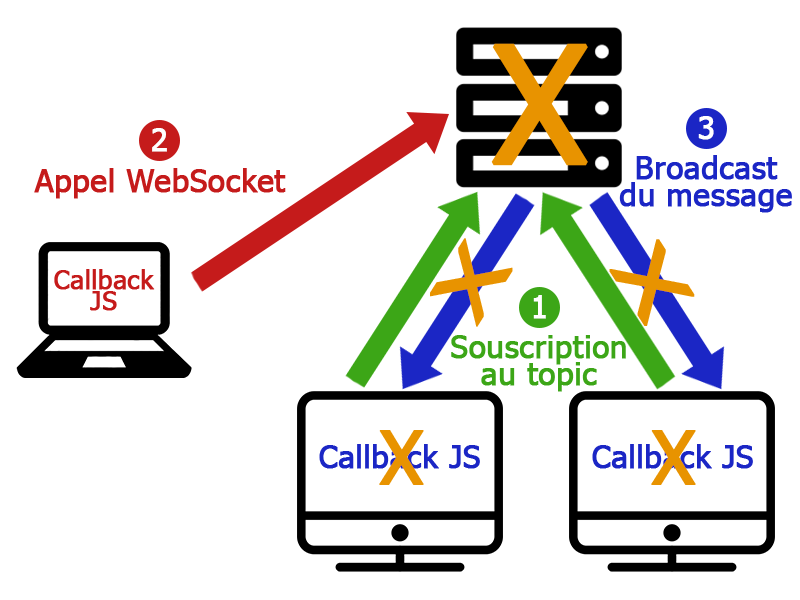
<style>
.page{position:relative;width:800px;height:600px;background:#ffffff}
.page>*{position:absolute;margin:0}
.t1{font:161.5px "Tahoma";color:#e89300;font-weight:bold}
.t2{font:31.2px "Tahoma";color:#ffffff;font-weight:bold}
.t3{font:31.2px "Tahoma";color:#1b26c5;font-weight:bold}
.t4{font:31.2px "Tahoma";color:#c51b1b;font-weight:bold}
.t5{font:76.6px "Tahoma";color:#e89300;font-weight:bold;scale:1.51 1}
.t6{font:26px "Tahoma";color:#c51b1b;font-weight:bold}
.t7{font:31.2px "Tahoma";color:#3ca617;font-weight:bold}
.t8{font:73.9px "Tahoma";color:#e89300;font-weight:bold}
</style>
<div class="page">
<p class="t1" style="left:491px;top:43px;width:97px;height:123px">X</p>
<p class="t2" style="left:698px;top:116px;width:16px;height:24px">3</p>
<p class="t2" style="left:152px;top:128px;width:15px;height:24px">2</p>
<p class="t3" style="left:619px;top:155px;width:173px;height:58px;text-align:center">Broadcast<br>du message</p>
<p class="t4" style="left:34px;top:168px;width:252px;height:31px">Appel WebSocket</p>
<p class="t5" style="left:430px;top:238px;width:83px;height:89px;rotate:-58deg">X</p>
<p class="t5" style="left:609px;top:239px;width:86px;height:87px;rotate:-123deg">X</p>
<p class="t6" style="left:54px;top:269px;width:101px;height:42px;text-align:center">Callback<br>JS</p>
<p class="t2" style="left:533px;top:295px;width:13px;height:24px">1</p>
<p class="t7" style="left:451px;top:335px;width:175px;height:57px;text-align:center">Souscription<br>au topic</p>
<p class="t8" style="left:379px;top:430px;width:45px;height:55px">X</p>
<p class="t8" style="left:651px;top:430px;width:45px;height:55px">X</p>
<p class="t3" style="left:319px;top:444px;width:161px;height:25px">Callback JS</p>
<p class="t3" style="left:592px;top:444px;width:161px;height:25px">Callback JS</p>
</div>
